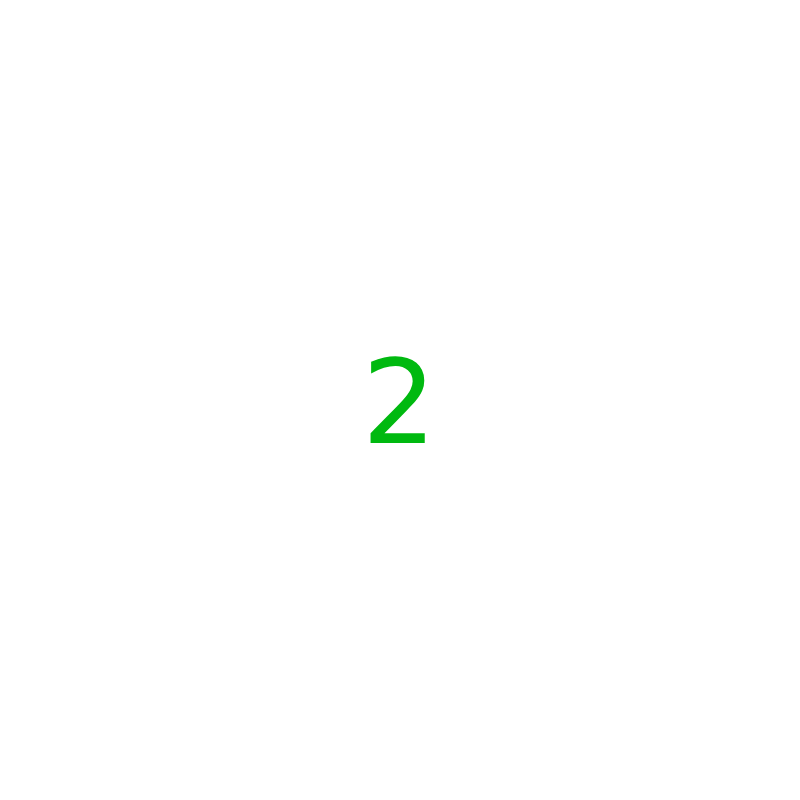
<style>
.page{position:relative;width:800px;height:800px;background:#ffffff}
.page>*{position:absolute;margin:0}
.t1{font:117px "DejaVuSans";color:#00b910}
</style>
<div class="page">
<p class="t1" style="left:370px;top:356px;width:55px;height:87px">2</p>
</div>
